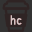
<style>
.page{position:relative;width:32px;height:32px;background:#333333}
.page>*{position:absolute;margin:0}
.t1{font:12.3px "DINPro-Regular";color:#d3c5c5;font-weight:bold;scale:0.89 1}
</style>
<div class="page">
<p class="t1" style="left:10px;top:15px;width:12px;height:10px">hc</p>
</div>
